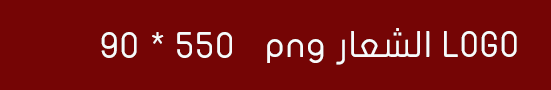
<style>
.page{position:relative;width:551px;height:90px;background:#750505}
.page>*{position:absolute;margin:0}
.t1{font:36px "JFFlat-Regular";letter-spacing:0.016em;color:#f8fbfc}
.t2{font:36px "JFFlat-Regular";letter-spacing:0.016em;color:#f7fafb}
</style>
<div class="page">
<p class="t1" style="left:267px;top:28px;width:250px;height:37px">LOGO الشعار png</p>
<p class="t2" style="left:101px;top:32px;width:131px;height:26px">550 * 90</p>
</div>
